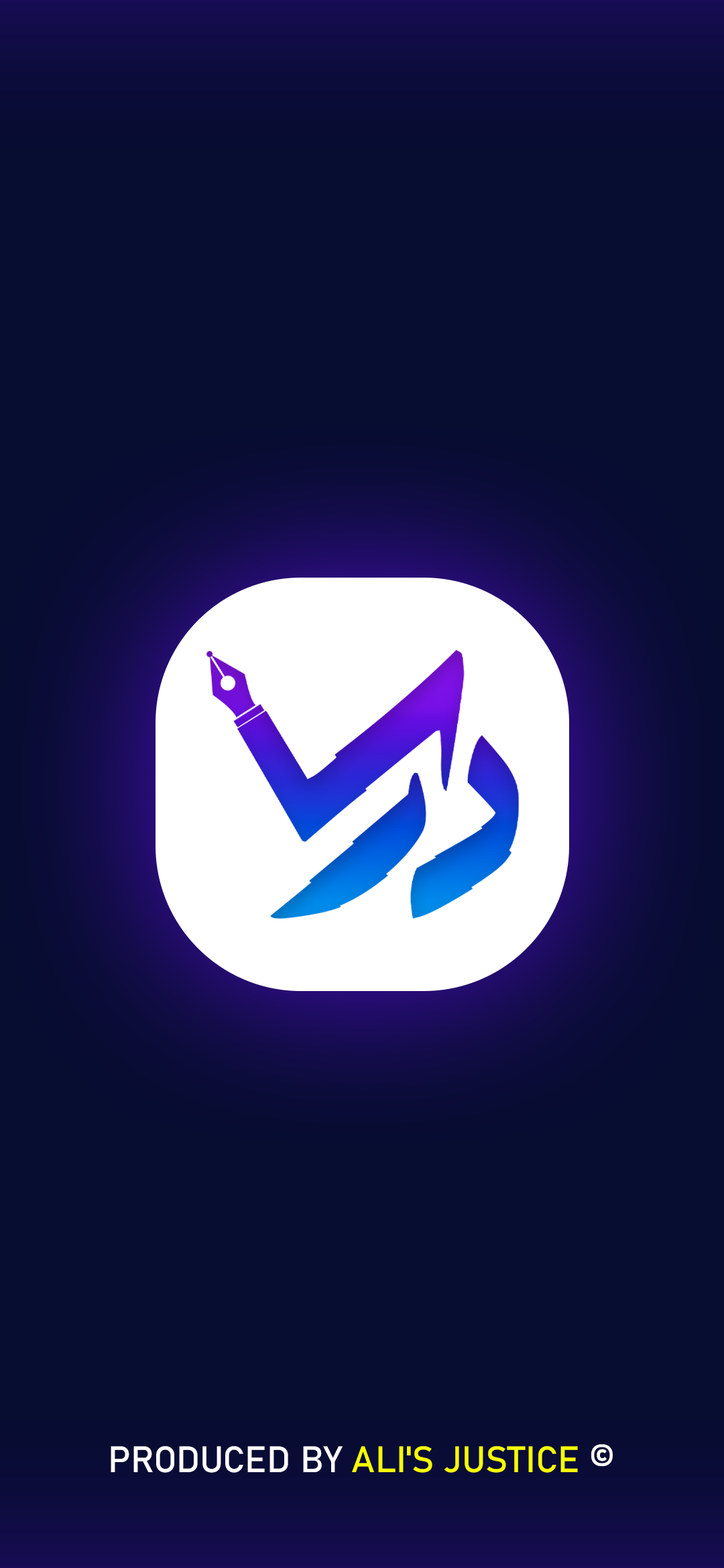
<style>
.page{position:relative;width:724px;height:1568px;background:#070c31}
.page>*{position:absolute;margin:0}
.t1{font:36.3px "Bahnschrift";color:#f6ff00;text-transform:uppercase}
.t2{font:36.3px "Bahnschrift";color:#ffffff;text-transform:uppercase}
</style>
<div class="page">
<p class="t1" style="left:111px;top:1444px;width:501px;height:29px"><span class="t2">produced by </span>Ali's Justice<span class="t2"> ©</span></p>
</div>
